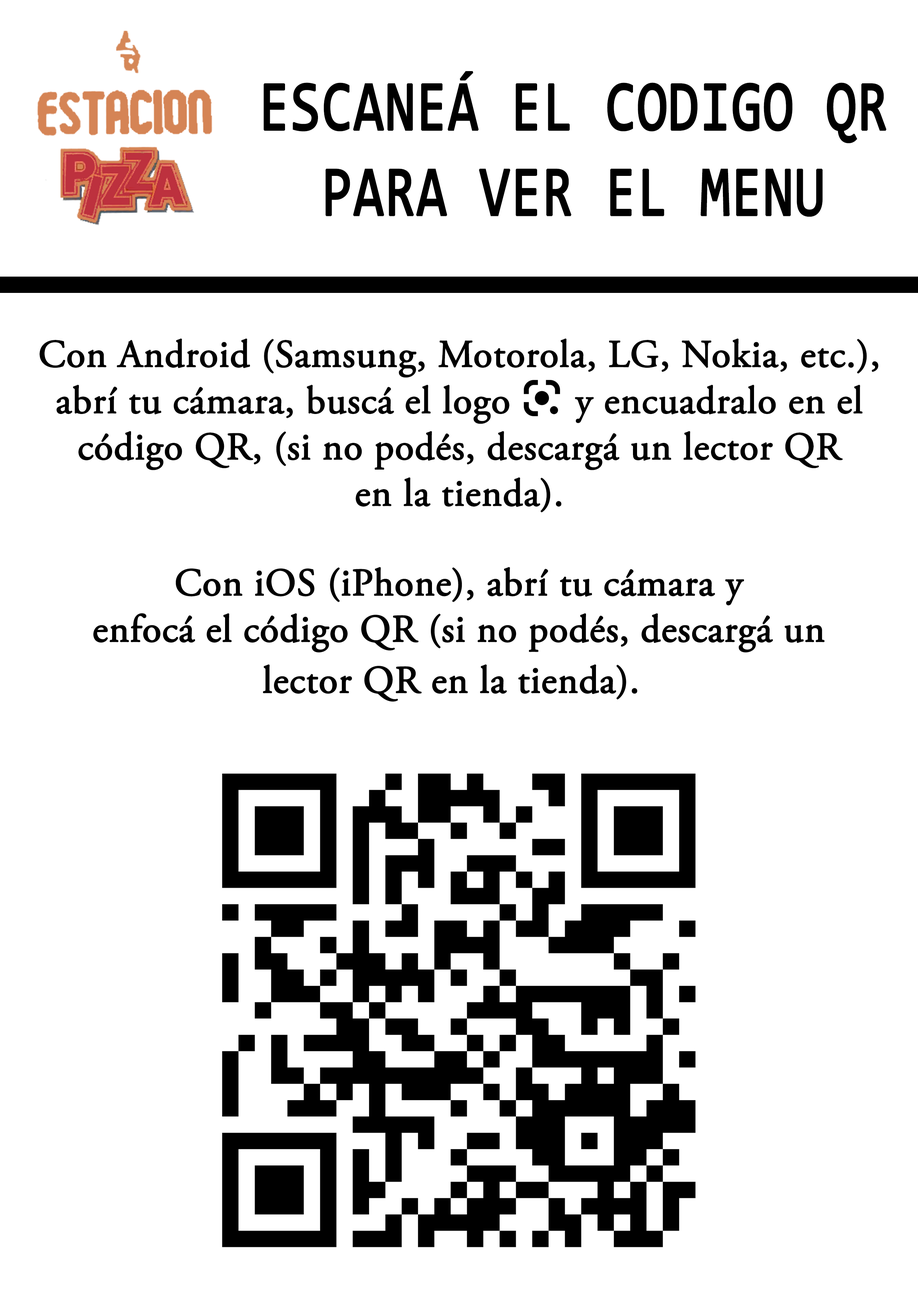
<style>
.page{position:relative;width:918px;height:1299px;background:#ffffff}
.page>*{position:absolute;margin:0}
.t1{font:71.1px "Consolas";color:#000000;font-weight:bold;scale:0.77 1}
.t2{font:38.6px "AGaramondPro-Regular";color:#000000;font-weight:bold}
</style>
<div class="page">
<p class="t1" style="left:264px;top:71px;width:623px;height:146px;text-align:center">ESCANEÁ EL CODIGO QR<br>PARA VER EL MENU</p>
<p class="t2" style="left:40px;top:338px;width:839px;height:174px;text-align:center">Con Android (Samsung, Motorola, LG, Nokia, etc.),<br>abrí tu cámara, buscá el logo      y encuadralo en el<br>código QR, (si no podés, descargá un lector QR<br>en la tienda).</p>
</div>
